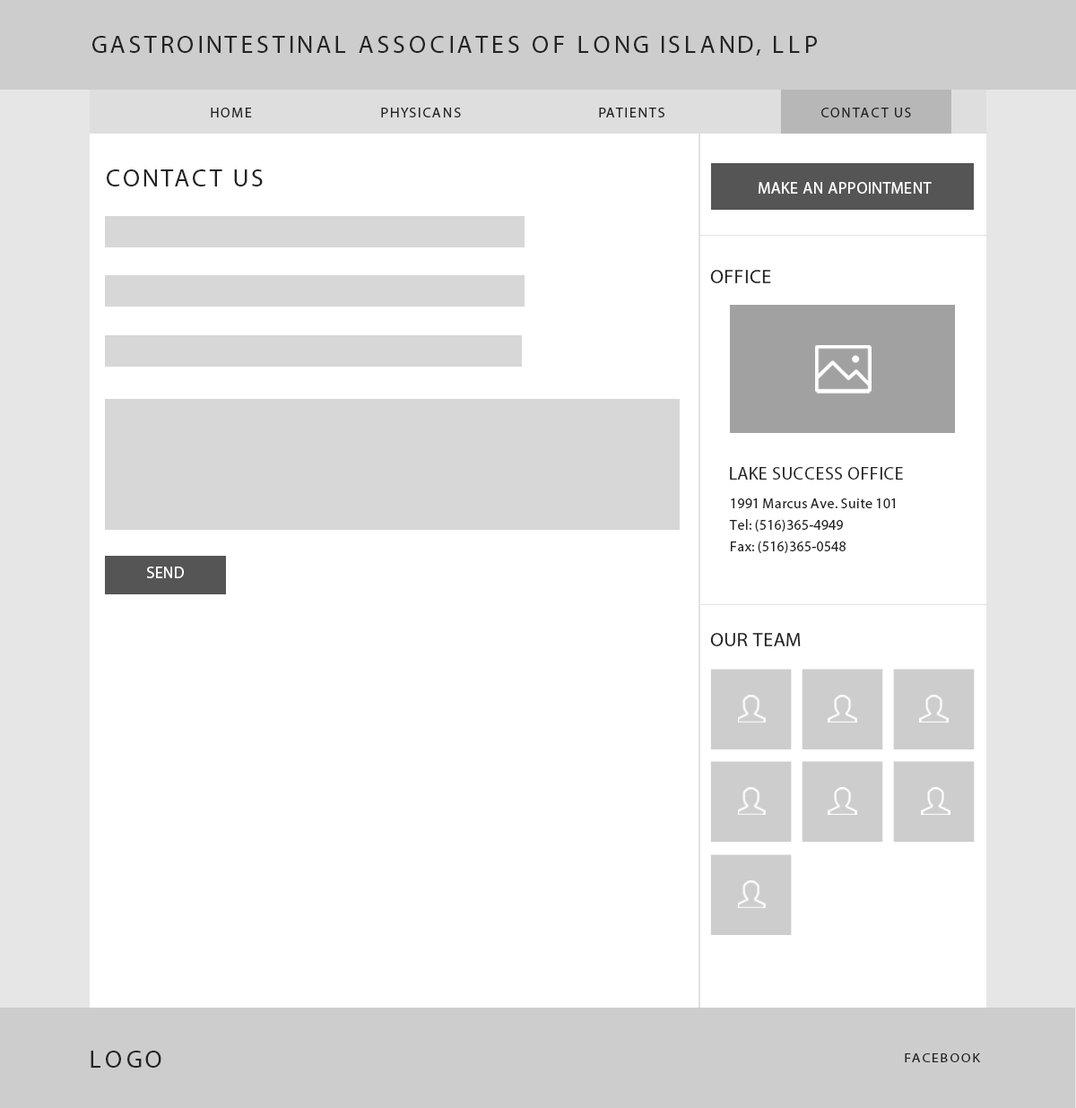
<style>
.page{position:relative;width:1076px;height:1108px;background:#ffffff}
.page>*{position:absolute;margin:0}
.t1{font:25.1px "MyriadPro-Regular";letter-spacing:0.12em;color:#222222;text-transform:uppercase}
.t2{font:14.3px "MyriadPro-Regular";letter-spacing:0.1em;color:#222222;text-transform:uppercase}
.t3{font:25.1px "MyriadPro-Regular";letter-spacing:0.1em;color:#222222;text-transform:uppercase}
.t4{font:16.1px "MyriadPro-Regular";letter-spacing:0.02em;color:#ffffff;text-transform:uppercase}
.t5{font:19.7px "MyriadPro-Regular";letter-spacing:0.02em;color:#222222;text-transform:uppercase}
.t6{font:17.9px "MyriadPro-Regular";letter-spacing:0.02em;color:#222222;text-transform:uppercase}
.t7{font:14.3px/21.5px "MyriadPro-Regular";letter-spacing:0.02em;color:#222222}
.t8{font:16.3px "MyriadPro-Regular";color:#ffffff;text-transform:uppercase}
.t9{font:12.1px "MyriadPro-Regular";letter-spacing:0.1em;color:#222222;text-transform:uppercase;scale:1.18 1}
</style>
<div class="page">
<p class="t1" style="left:92px;top:36px;width:725px;height:20px">Gastrointestinal Associates of Long Island, LLP</p>
<p class="t2" style="left:211px;top:108px;width:700px;height:9px">Home             Physicans   Patients   Contact Us</p>
<p class="t3" style="left:107px;top:169px;width:156px;height:18px">Contact Us</p>
<p class="t4" style="left:759px;top:182px;width:173px;height:12px">MAKE an Appointment</p>
<p class="t5" style="left:710px;top:270px;width:61px;height:13px">Office</p>
<p class="t6" style="left:730px;top:467px;width:173px;height:13px">lAKE sUCCESS oFFICE</p>
<p class="t7" style="left:729px;top:499px;width:166px;height:54px">1991 Marcus Ave. Suite 101<br>Tel: (516)365-4949<br>Fax: (516)365-0548</p>
<p class="t8" style="left:147px;top:567px;width:37px;height:11px">Send</p>
<p class="t5" style="left:710px;top:633px;width:91px;height:13px">Our Team</p>
<p class="t1" style="left:91px;top:1051px;width:70px;height:17px">LOGO</p>
<p class="t9" style="left:905px;top:1054px;width:76px;height:9px">Facebook</p>
</div>
